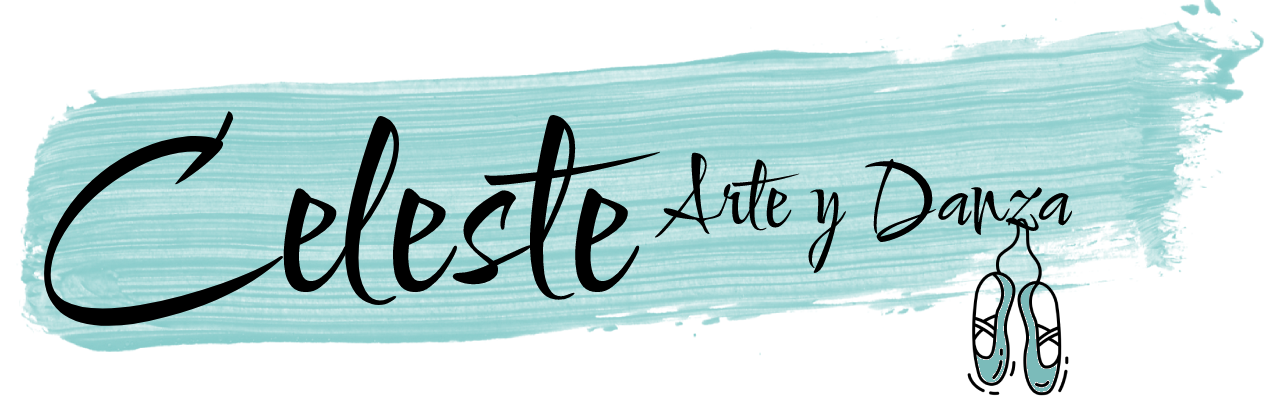
<style>
.page{position:relative;width:1280px;height:400px;background:#ffffff}
.page>*{position:absolute;margin:0}
.t1{font:244.5px "Comforter-Regular";color:#000000;scale:1.08 1}
.t2{font:93.9px "Comforter-Regular";color:#000000;scale:1.08 1}
</style>
<div class="page">
<p class="t1" style="left:44px;top:111px;width:618px;height:215px">Celeste</p>
<p class="t2" style="left:654px;top:152px;width:419px;height:121px">Arte y Danza</p>
</div>
